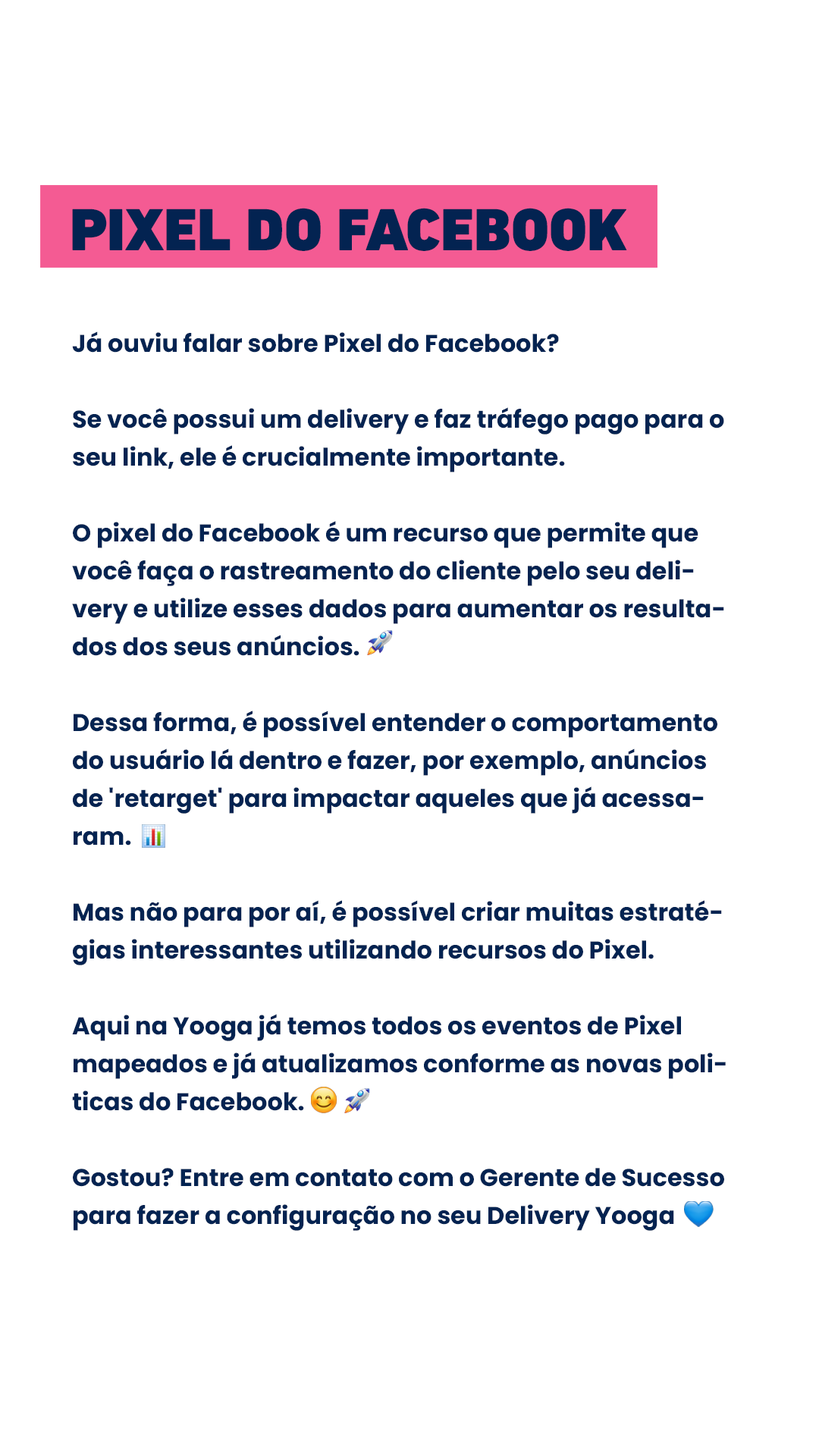
<style>
.page{position:relative;width:819px;height:1456px;background:#ffffff}
.page>*{position:absolute;margin:0}
.t1{font:60.5px "DINNextLTPro-Black";color:#032351;text-transform:uppercase}
.t2{font:24.3px/37.9px "Poppins-Bold";color:#032351}
</style>
<div class="page">
<p class="t1" style="left:72px;top:208px;width:555px;height:43px">PIXEL DO FACEBOOK</p>
<p class="t2" style="left:72px;top:331px;width:654px;height:900px">Já ouviu falar sobre Pixel do Facebook?<br><br>Se você possui um delivery e faz tráfego pago para o seu link, ele é crucialmente importante.<br><br>O pixel do Facebook é um recurso que permite que você faça o rastreamento do cliente pelo seu delivery e utilize esses dados para aumentar os resultados dos seus anúncios.<br><br>Dessa forma, é possível entender o comportamento do usuário lá dentro e fazer, por exemplo, anúncios de 'retarget' para impactar aqueles que já acessaram.<br><br>Mas não para por aí, é possível criar muitas estratégias interessantes utilizando recursos do Pixel.<br><br>Aqui na Yooga já temos todos os eventos de Pixel mapeados e já atualizamos conforme as novas politicas do Facebook. <br><br>Gostou? Entre em contato com o Gerente de Sucesso para fazer a configuração no seu Delivery Yooga</p>
</div>
